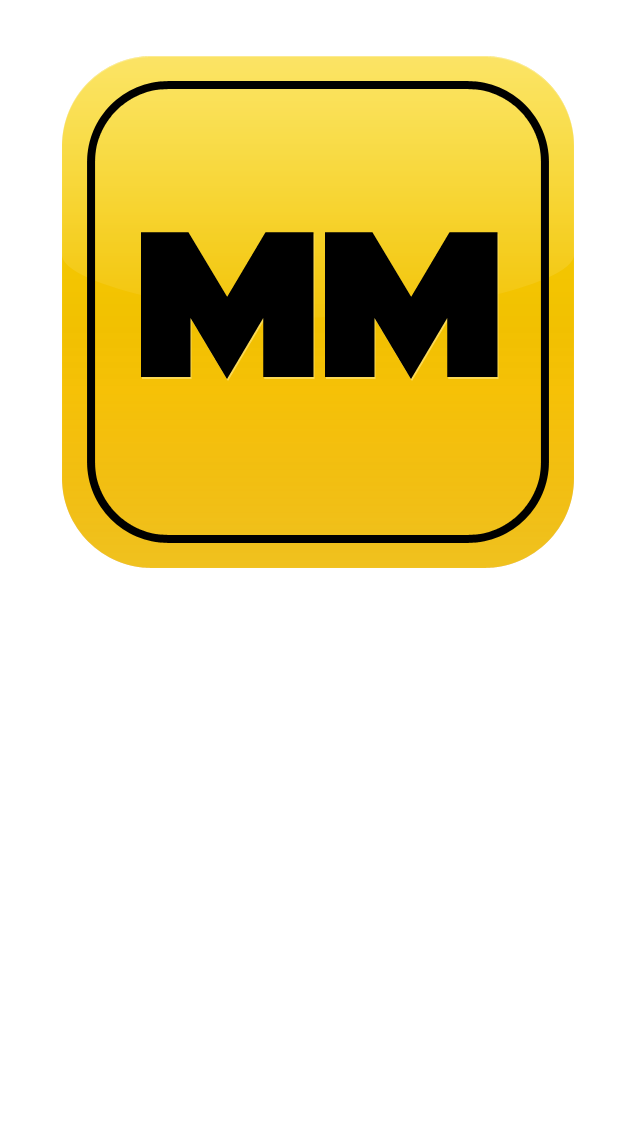
<style>
.page{position:relative;width:640px;height:1136px;background:#ffffff}
.page>*{position:absolute;margin:0}
.t1{font:201.6px "GuildfordProTitling";letter-spacing:0.01em;color:#000000}
</style>
<div class="page">
<p class="t1" style="left:141px;top:232px;width:357px;height:147px">MM</p>
</div>
